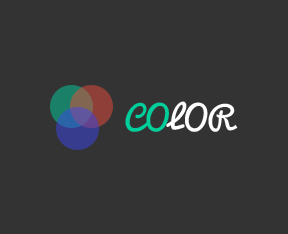
<style>
.page{position:relative;width:288px;height:234px;background:#333333}
.page>*{position:absolute;margin:0}
.t1{font:30px "Pacifico-Regular";color:#ffffff;text-transform:uppercase}
.t2{font:30px "Pacifico-Regular";color:#00ce9b;text-transform:uppercase}
</style>
<div class="page">
<p class="t1" style="left:125px;top:101px;width:113px;height:31px"><span class="t2">Co</span>lor</p>
</div>
